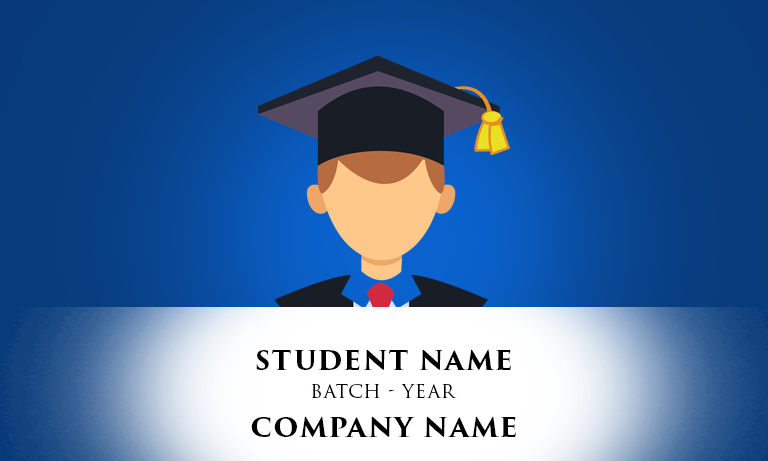
<style>
.page{position:relative;width:768px;height:461px}
.page>*{position:absolute;margin:0}
.t1{font:26.4px "TrajanPro3-Bold";letter-spacing:0.05em;color:#000000;text-transform:uppercase}
.t2{font:18px "TrajanPro3-Regular";letter-spacing:0.05em;color:#000000;text-transform:uppercase}
</style>
<div class="page">
<p class="t1" style="left:256px;top:349px;width:255px;height:22px">student name</p>
<p class="t2" style="left:311px;top:383px;width:146px;height:15px">batch - year</p>
<p class="t1" style="left:251px;top:416px;width:265px;height:21px">company name</p>
</div>
